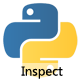
<style>
.page{position:relative;width:80px;height:80px;background:#ffffff}
.page>*{position:absolute;margin:0}
.t1{font:13px "SegoeUISymbol";color:#000000}
</style>
<div class="page">
<p class="t1" style="left:21px;top:66px;width:42px;height:13px">Inspect</p>
</div>
